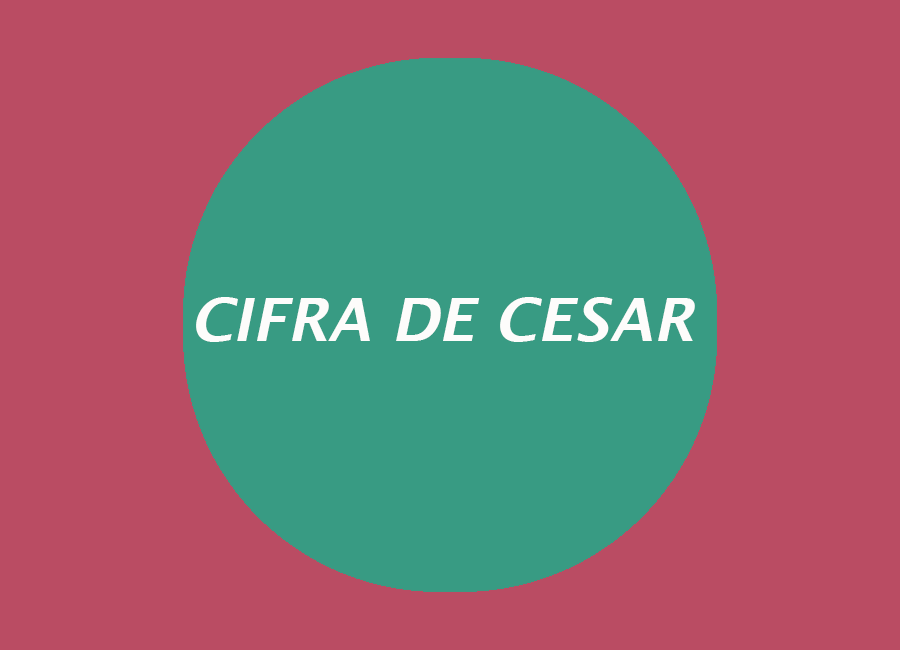
<style>
.page{position:relative;width:900px;height:650px;background:#ba4c63}
.page>*{position:absolute;margin:0}
.t1{font:60px "LucidaSans-DemiItalic";color:#fdfcfb}
</style>
<div class="page">
<p class="t1" style="left:196px;top:297px;width:499px;height:45px">CIFRA DE CESAR</p>
</div>
